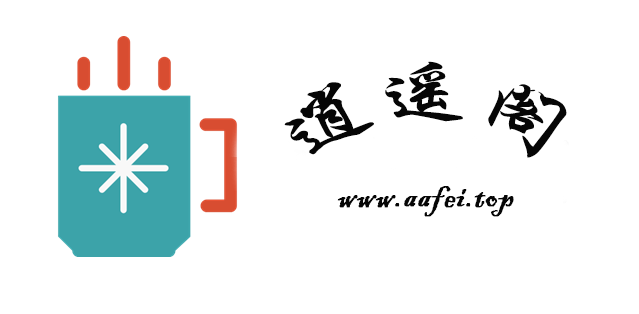
<style>
.page{position:relative;width:639px;height:314px;background:#ffffff}
.page>*{position:absolute;margin:0}
.t1{font:72px "STXingkai";color:#060606;font-weight:bold}
.t2{font:36px "BlackadderITC-Regular";color:#060606;font-weight:bold}
</style>
<div class="page">
<p class="t1" style="left:284px;top:61px;width:283px;height:97px">逍遥阁</p>
<p class="t2" style="left:337px;top:186px;width:177px;height:31px">www.aafei.top</p>
</div>
